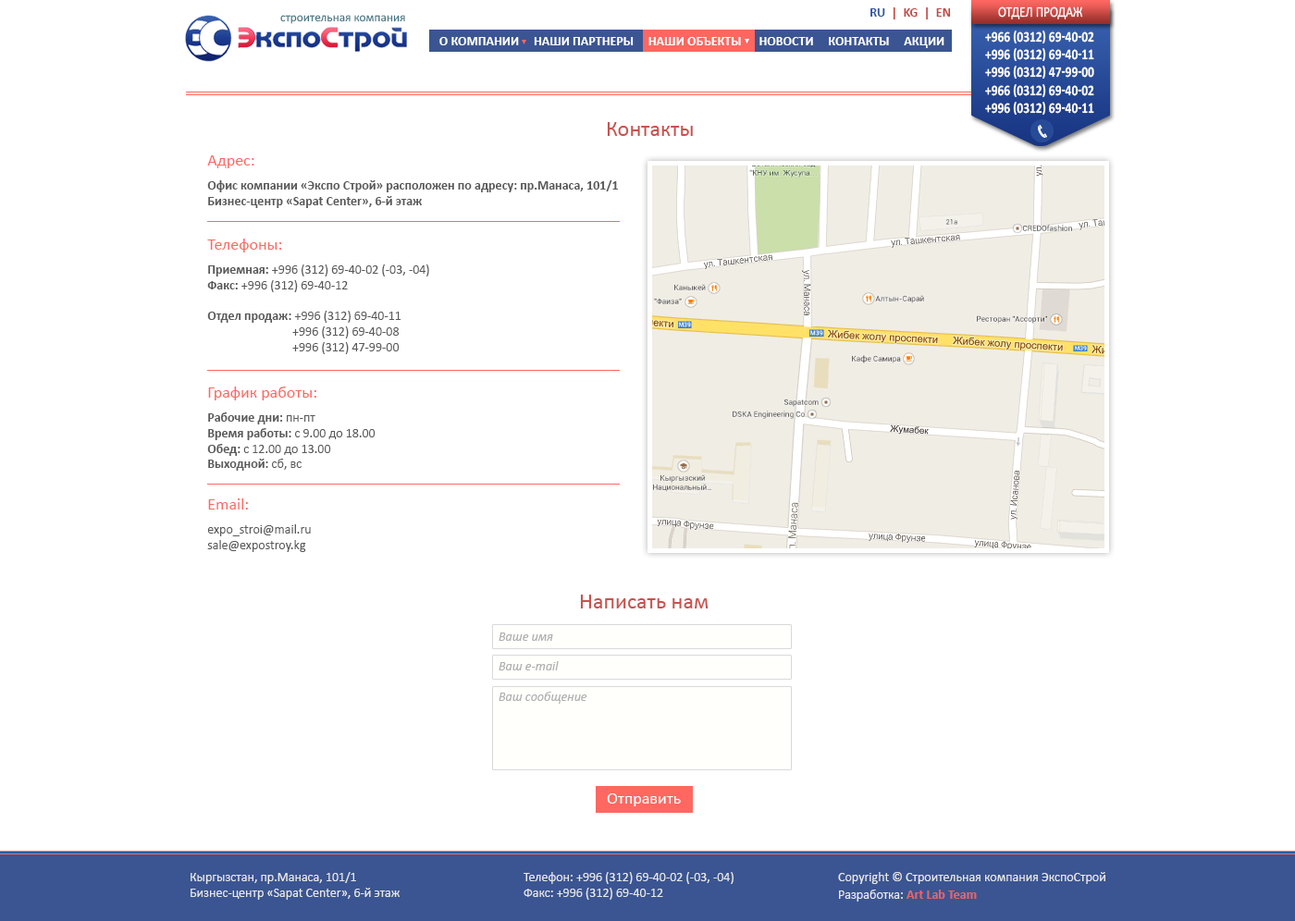
<style>
.page{position:relative;width:1295px;height:921px;background:#ffffff}
.page>*{position:absolute;margin:0}
.t1{font:12.2px "Calibri";color:#447583}
.t2{font:12.9px "Calibri-Bold";color:#c44742;text-transform:uppercase}
.t3{font:12.9px "Calibri-Bold";color:#3057a4;text-transform:uppercase}
.t4{font:14.8px "Calibri";color:#ffffff;text-transform:uppercase;scale:0.84 1}
.t5{font:12.9px "Calibri-Bold";color:#ffffff;text-transform:uppercase}
.t6{font:14.8px "Calibri-Bold";color:#ffffff;text-transform:uppercase;scale:0.84 1}
.t7{font:22.2px "Calibri";color:#c9534e}
.t8{font:16.6px "Calibri";color:#fe6861}
.t9{font:12.9px "Calibri-Bold";color:#595959}
.t10{font:12.9px "Calibri";color:#595959}
.t11{font:12.9px "Calibri-Italic";color:#b0b0b0}
.t12{font:16.6px "Calibri";color:#ffffff}
.t13{font:12.9px "Calibri";color:#e8e8e8}
.t14{font:12.9px "Calibri-Bold";color:#e36863}
</style>
<div class="page">
<p class="t1" style="left:280px;top:15px;width:125px;height:9px">строительная компания</p>
<p class="t2" style="left:870px;top:7px;width:81px;height:12px"><span class="t3">RU</span>  |  KG  |  EN</p>
<p class="t4" style="left:998px;top:6px;width:85px;height:13px">Отдел продаж</p>
<p class="t5" style="left:439px;top:37px;width:505px;height:11px">О компании     Наши партнеры     Наши объекты      Новости     Контакты     Акции</p>
<p class="t6" style="left:985px;top:31px;width:109px;height:84px">+966 (0312) 69-40-02<br>+996 (0312) 69-40-11<br>+996 (0312) 47-99-00<br>+966 (0312) 69-40-02<br>+996 (0312) 69-40-11</p>
<p class="t7" style="left:607px;top:122px;width:86px;height:14px">Контакты</p>
<p class="t8" style="left:207px;top:155px;width:47px;height:13px">Адрес:</p>
<p class="t9" style="left:207px;top:180px;width:411px;height:28px">Офис компании «Экспо Строй» расположен по адресу: пр.Манаса, 101/1<br>Бизнес-центр «Sapat Center», 6-й этаж</p>
<p class="t8" style="left:207px;top:239px;width:74px;height:13px">Телефоны:</p>
<p class="t10" style="left:207px;top:264px;width:222px;height:90px"><span class="t9">Приемная:</span> +996 (312) 69-40-02 (-03, -04)<br><span class="t9">Факс:</span> +996 (312) 69-40-12<br><br><span class="t9">Отдел продаж: </span>+996 (312) 69-40-11<br>                             +996 (312) 69-40-08<br>                             +996 (312) 47-99-00</p>
<p class="t8" style="left:208px;top:387px;width:108px;height:13px">График работы:</p>
<p class="t10" style="left:207px;top:412px;width:168px;height:59px"><span class="t9">Рабочие дни:</span> пн-пт<br><span class="t9">Время работы:</span> с 9.00 до 18.00<br><span class="t9">Обед: </span>с 12.00 до 13.00<br><span class="t9">Выходной: </span>сб, вс</p>
<p class="t8" style="left:208px;top:498px;width:40px;height:12px">Email:</p>
<p class="t10" style="left:207px;top:524px;width:104px;height:28px">expo_stroi@mail.ru<br>sale@expostroy.kg</p>
<p class="t7" style="left:580px;top:595px;width:128px;height:13px">Написать нам</p>
<p class="t11" style="left:498px;top:633px;width:55px;height:8px">Ваше имя</p>
<p class="t11" style="left:498px;top:661px;width:61px;height:9px">Ваш e-mail</p>
<p class="t11" style="left:498px;top:692px;width:89px;height:12px">Ваш сообщение</p>
<p class="t12" style="left:607px;top:793px;width:74px;height:13px">Отправить</p>
<p class="t13" style="left:190px;top:872px;width:209px;height:28px">Кыргызстан, пр.Манаса, 101/1<br>Бизнес-центр «Sapat Center», 6-й этаж</p>
<p class="t13" style="left:523px;top:872px;width:210px;height:28px">Телефон: +996 (312) 69-40-02 (-03, -04)<br>Факс: +996 (312) 69-40-12</p>
<p class="t13" style="left:838px;top:872px;width:267px;height:12px">Copyright © Строительная компания ЭкспоСтрой</p>
<p class="t14" style="left:839px;top:890px;width:138px;height:12px"><span class="t13">Разработка: </span>Art Lab Team</p>
</div>
